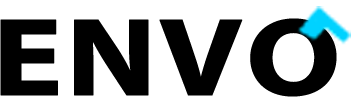
<style>
.page{position:relative;width:353px;height:100px;background:#ffffff}
.page>*{position:absolute;margin:0}
.t1{font:112px "MyriadPro-Bold";color:#000000;font-weight:bold;scale:1.17 1}
</style>
<div class="page">
<p class="t1" style="left:0px;top:18px;width:337px;height:79px">ENVO</p>
</div>
